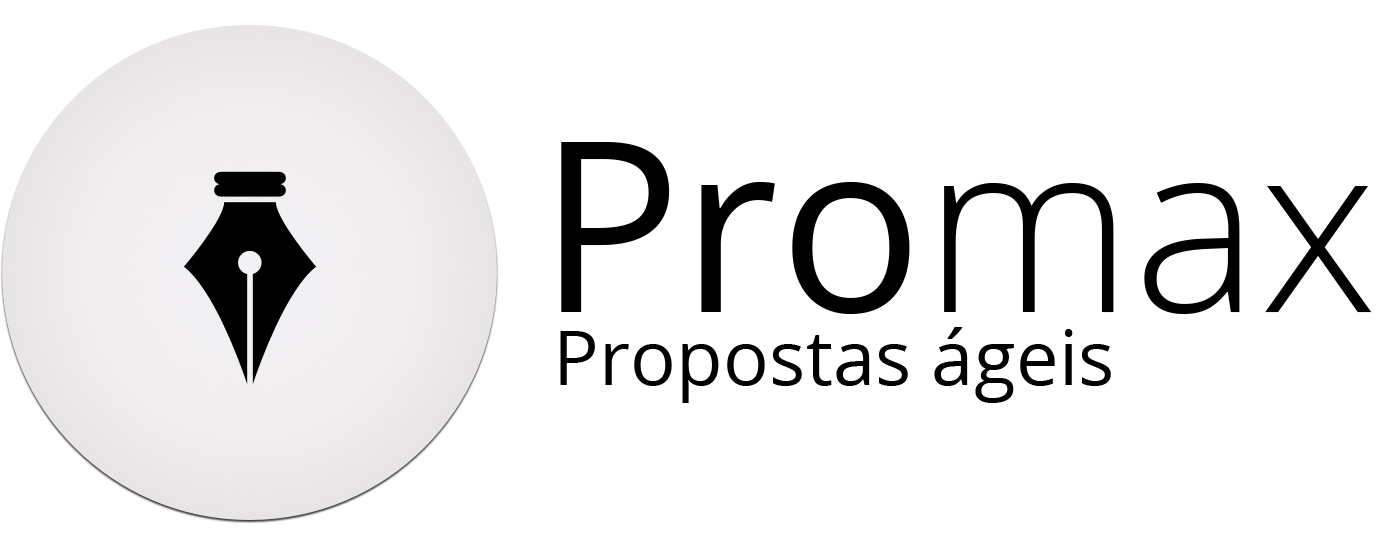
<style>
.page{position:relative;width:1400px;height:550px;background:#ffffff}
.page>*{position:absolute;margin:0}
.t1{font:238.3px "OpenSans";color:#000000}
.t2{font:238.3px "OpenSans-Light";color:#000000}
.t3{font:76.4px "OpenSans";color:#000000}
</style>
<div class="page">
<p class="t1" style="left:561px;top:142px;width:811px;height:172px">Pro<span class="t2">max</span></p>
<p class="t3" style="left:560px;top:327px;width:551px;height:76px">Propostas ágeis</p>
</div>
